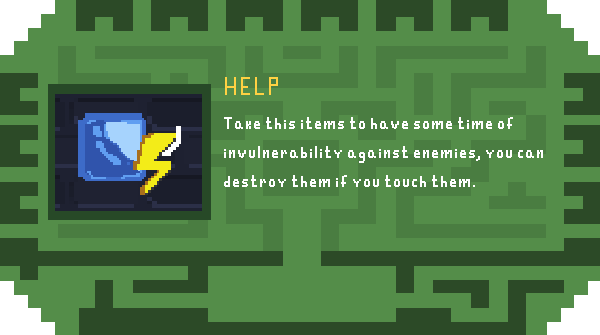
<style>
.page{position:relative;width:600px;height:335px;background:#548d49}
.page>*{position:absolute;margin:0}
.t1{font:36px "Pixel-MYZ";color:#ffd143}
.t2{font:24px "Pixel-MYZ";color:#ffffff}
</style>
<div class="page">
<p class="t1" style="left:225px;top:77px;width:53px;height:18px">HELP</p>
<p class="t2" style="left:224px;top:117px;width:319px;height:70px">Take this items to have some time of<br>invulnerability against enemies, you can <br>destroy them if you touch them.</p>
</div>
